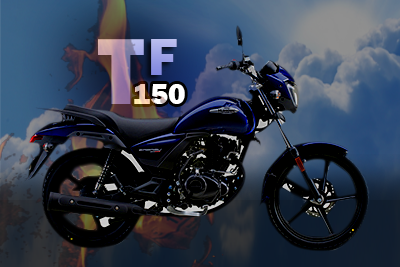
<style>
.page{position:relative;width:400px;height:267px}
.page>*{position:absolute;margin:0}
.t1{font:97.4px "FranklinGothic-Heavy"}
.t2{font:54.4px "FranklinGothic-Heavy"}
.t3{font:30px "FranklinGothic-Heavy";color:#ffffff}
</style>
<div class="page">
<p class="t1" style="left:98px;top:39px;width:46px;height:65px">T</p>
<p class="t2" style="left:151px;top:39px;width:26px;height:36px">F</p>
<p class="t3" style="left:134px;top:84px;width:51px;height:20px">150</p>
</div>
